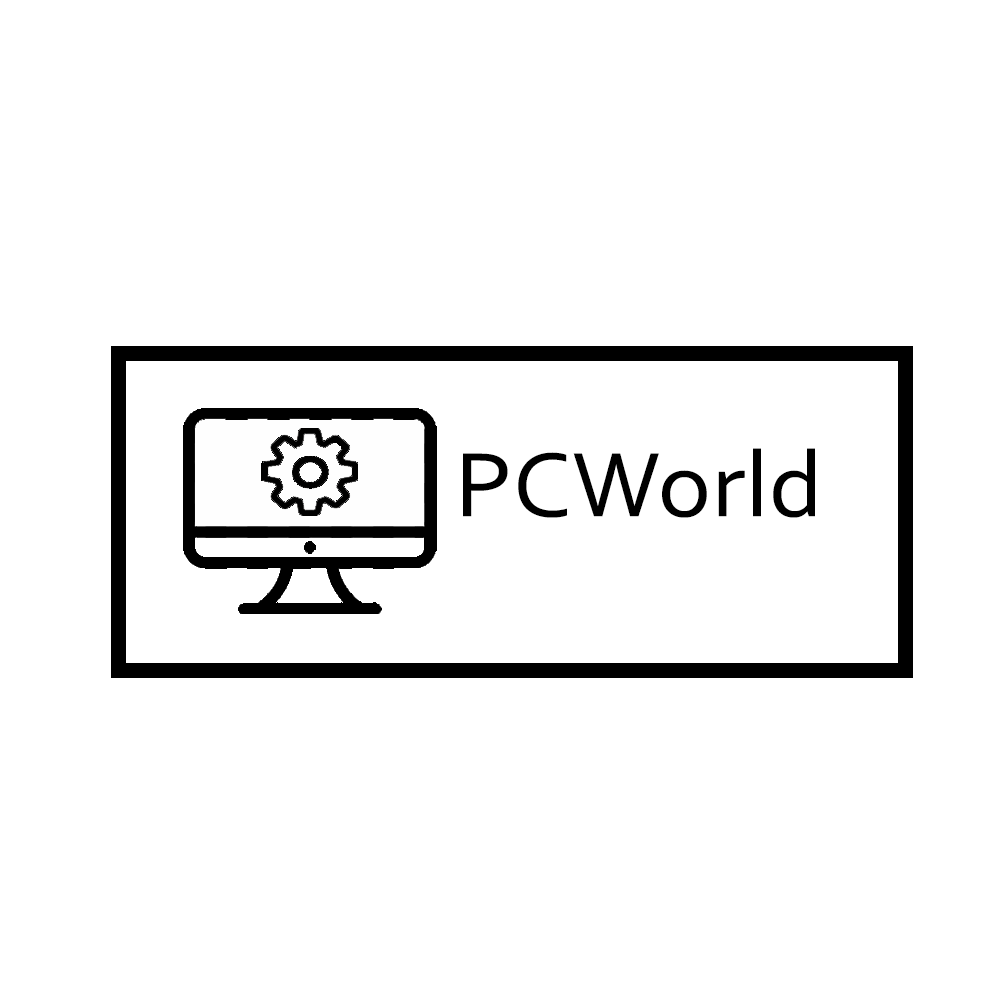
<style>
.page{position:relative;width:992px;height:992px;background:#ffffff}
.page>*{position:absolute;margin:0}
.t1{font:95.5px "Corbel";color:#000000;scale:1.06 1}
</style>
<div class="page">
<p class="t1" style="left:463px;top:448px;width:352px;height:70px">PCWorld</p>
</div>
